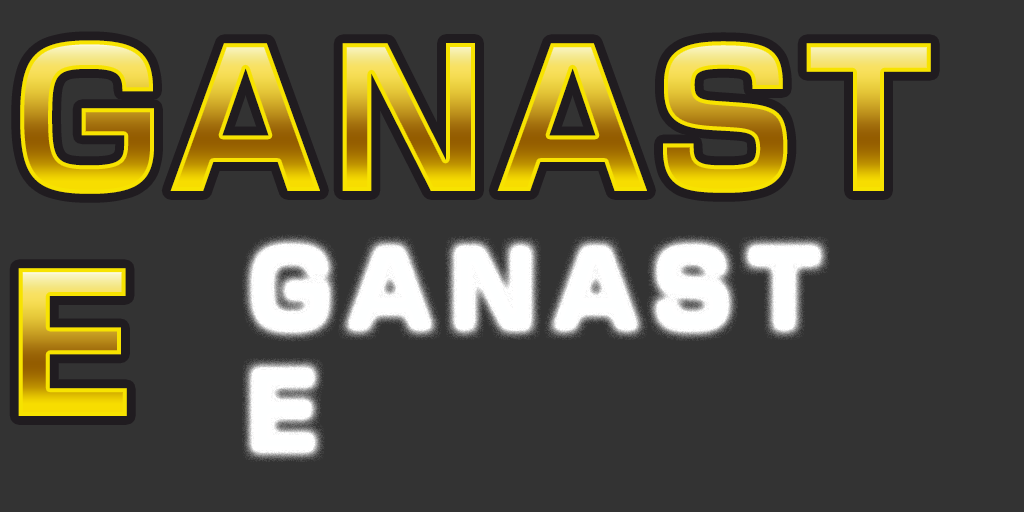
<style>
.page{position:relative;width:1024px;height:512px;background:#333333}
.page>*{position:absolute;margin:0}
.t1{font:205.1px "NewScience-Bold";letter-spacing:0.045em;text-transform:uppercase;scale:0.94 1}
.t2{font:111px "NewScience-Bold";letter-spacing:0.18em;color:#feffff;text-transform:uppercase;scale:0.94 1}
.t3{font:111px "NewScience-Bold";letter-spacing:0.045em;color:#feffff;text-transform:uppercase;scale:0.94 1}
</style>
<div class="page">
<p class="t1" style="left:20px;top:40px;width:911px;height:154px">GANAST</p>
<p class="t2" style="left:254px;top:246px;width:564px;height:84px">GANAST</p>
<p class="t1" style="left:18px;top:268px;width:109px;height:148px">E</p>
<p class="t3" style="left:254px;top:370px;width:59px;height:80px">E</p>
</div>
